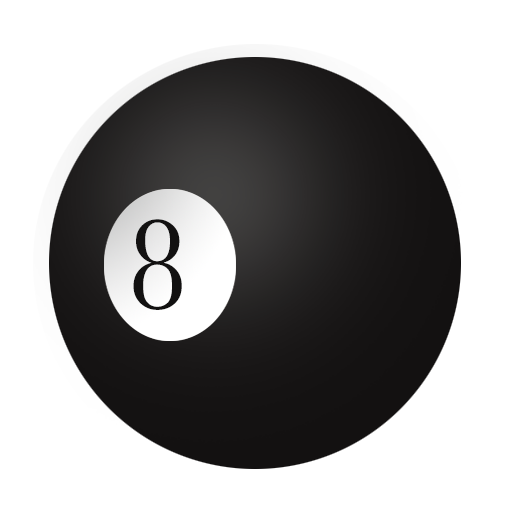
<style>
.page{position:relative;width:512px;height:512px;background:#ffffff}
.page>*{position:absolute;margin:0}
.t1{font:134.5px "Baskerville";letter-spacing:-0.01em;color:#121111;scale:0.87 1}
</style>
<div class="page">
<p class="t1" style="left:133px;top:219px;width:49px;height:91px">8</p>
</div>
